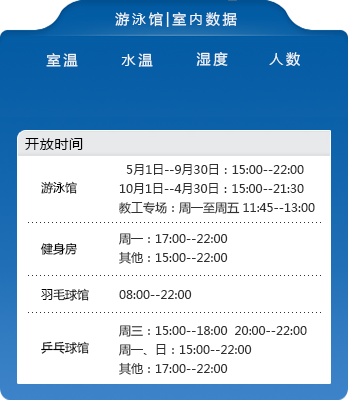
<style>
.page{position:relative;width:348px;height:400px;background:#ffffff}
.page>*{position:absolute;margin:0}
.t1{font:14px "MicrosoftYaHei";letter-spacing:0.2em;color:#f0f8fb}
.t2{font:12px/19px "MicrosoftYaHei";color:#313131}
.t3{font:12px "MicrosoftYaHei";color:#000000}
.t4{font:12px "MicrosoftYaHei";color:#313131}
</style>
<div class="page">
<p class="t1" style="left:115px;top:12px;width:122px;height:15px">游泳馆|室内数据</p>
<p class="t1" style="left:46px;top:53px;width:32px;height:14px">室温</p>
<p class="t1" style="left:121px;top:53px;width:32px;height:14px">水温</p>
<p class="t1" style="left:196px;top:52px;width:32px;height:15px">湿度</p>
<p class="t1" style="left:269px;top:52px;width:31px;height:14px">人数</p>
<p class="t2" style="left:119px;top:164px;width:196px;height:50px">5月1日--9月30日：15:00--22:00<br>10月1日--4月30日：15:00--21:30<br>教工专场：周一至周五 11:45--13:00</p>
<p class="t3" style="left:41px;top:181px;width:36px;height:13px">游泳馆</p>
<p class="t2" style="left:119px;top:233px;width:109px;height:31px">周一：17:00--22:00    <br>其他：15:00--22:00</p>
<p class="t3" style="left:40px;top:242px;width:37px;height:13px">健身房</p>
<p class="t3" style="left:41px;top:288px;width:48px;height:13px">羽毛球馆</p>
<p class="t4" style="left:119px;top:290px;width:73px;height:9px">08:00--22:00</p>
<p class="t2" style="left:119px;top:325px;width:188px;height:50px">周三：15:00--18:00  20:00--22:00<br>周一、日：15:00--22:00    <br>其他：17:00--22:00</p>
<p class="t3" style="left:41px;top:341px;width:48px;height:13px">乒乓球馆</p>
</div>
